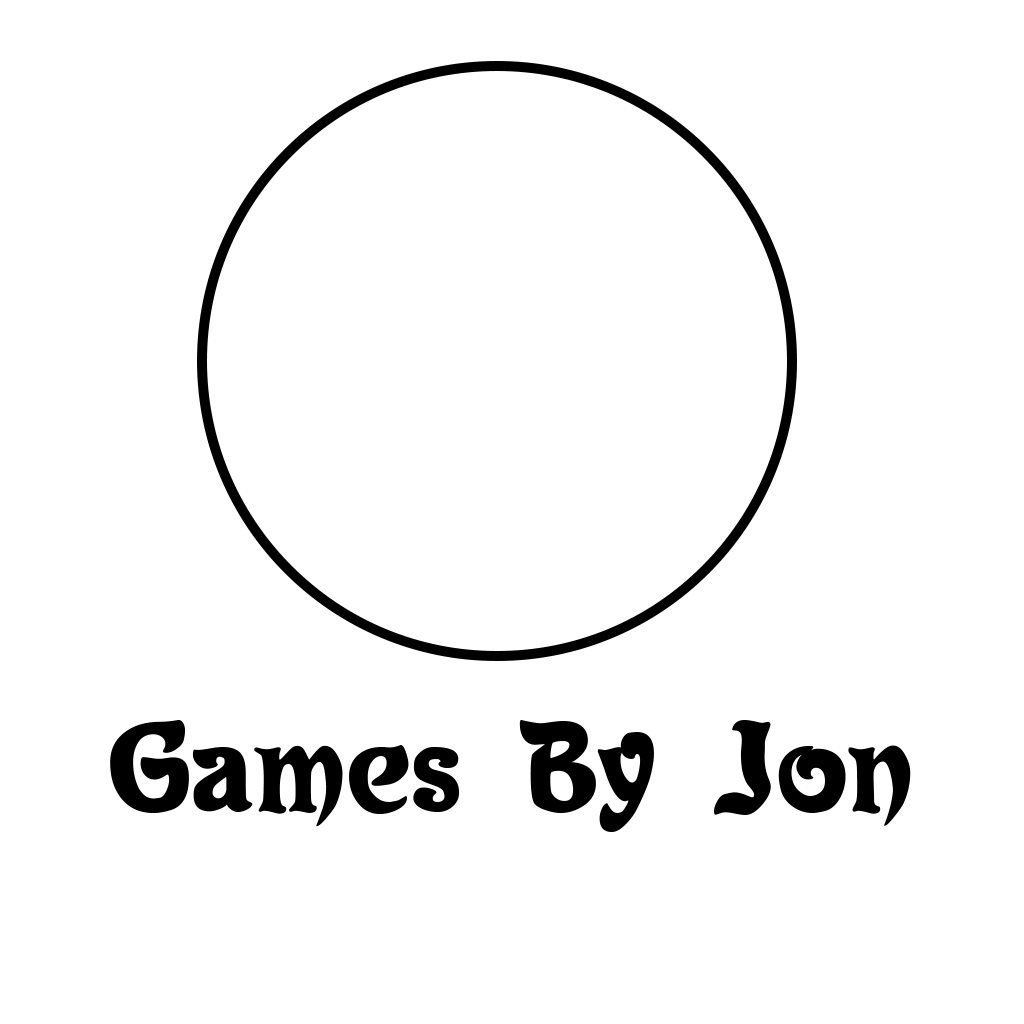
<style>
.page{position:relative;width:1024px;height:1024px;background:#ffffff}
.page>*{position:absolute;margin:0}
.t1{font:115px "Roland";color:#000000}
</style>
<div class="page">
<p class="t1" style="left:110px;top:720px;width:801px;height:112px">Games By Jon</p>
</div>
